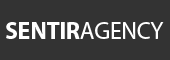
<style>
.page{position:relative;width:170px;height:60px;background:#333333}
.page>*{position:absolute;margin:0}
.t1{font:24px "MyriadPro-Bold";letter-spacing:-0.01em;color:#ffffff}
.t2{font:24px "MyriadPro-Regular";letter-spacing:-0.01em;color:#ffffff}
</style>
<div class="page">
<p class="t1" style="left:6px;top:22px;width:158px;height:17px">SENTIR<span class="t2">AGENCY</span></p>
</div>
